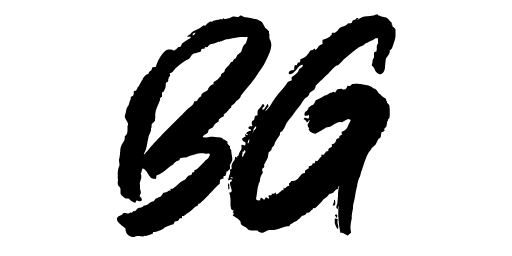
<style>
.page{position:relative;width:512px;height:256px;background:#ffffff}
.page>*{position:absolute;margin:0}
.t1{font:360px "Oh-Now!";letter-spacing:-0.075em;color:#000000}
</style>
<div class="page">
<p class="t1" style="left:117px;top:14px;width:279px;height:223px">bg</p>
</div>
